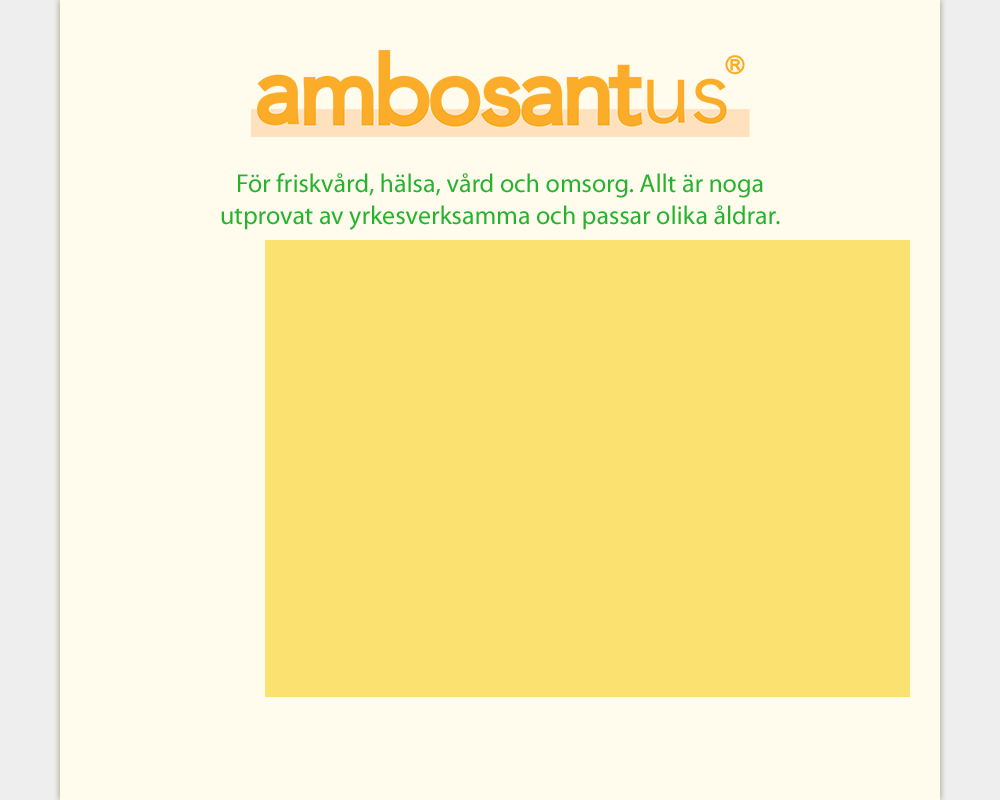
<style>
.page{position:relative;width:1000px;height:800px;background:#fffbed}
.page>*{position:absolute;margin:0}
.t1{font:26px "MyriadPro-Regular";color:#25b32f}
</style>
<div class="page">
<p class="t1" style="left:221px;top:173px;width:559px;height:57px;text-align:center">För friskvård, hälsa, vård och omsorg. Allt är noga<br>utprovat av yrkesverksamma och passar olika åldrar.</p>
</div>
